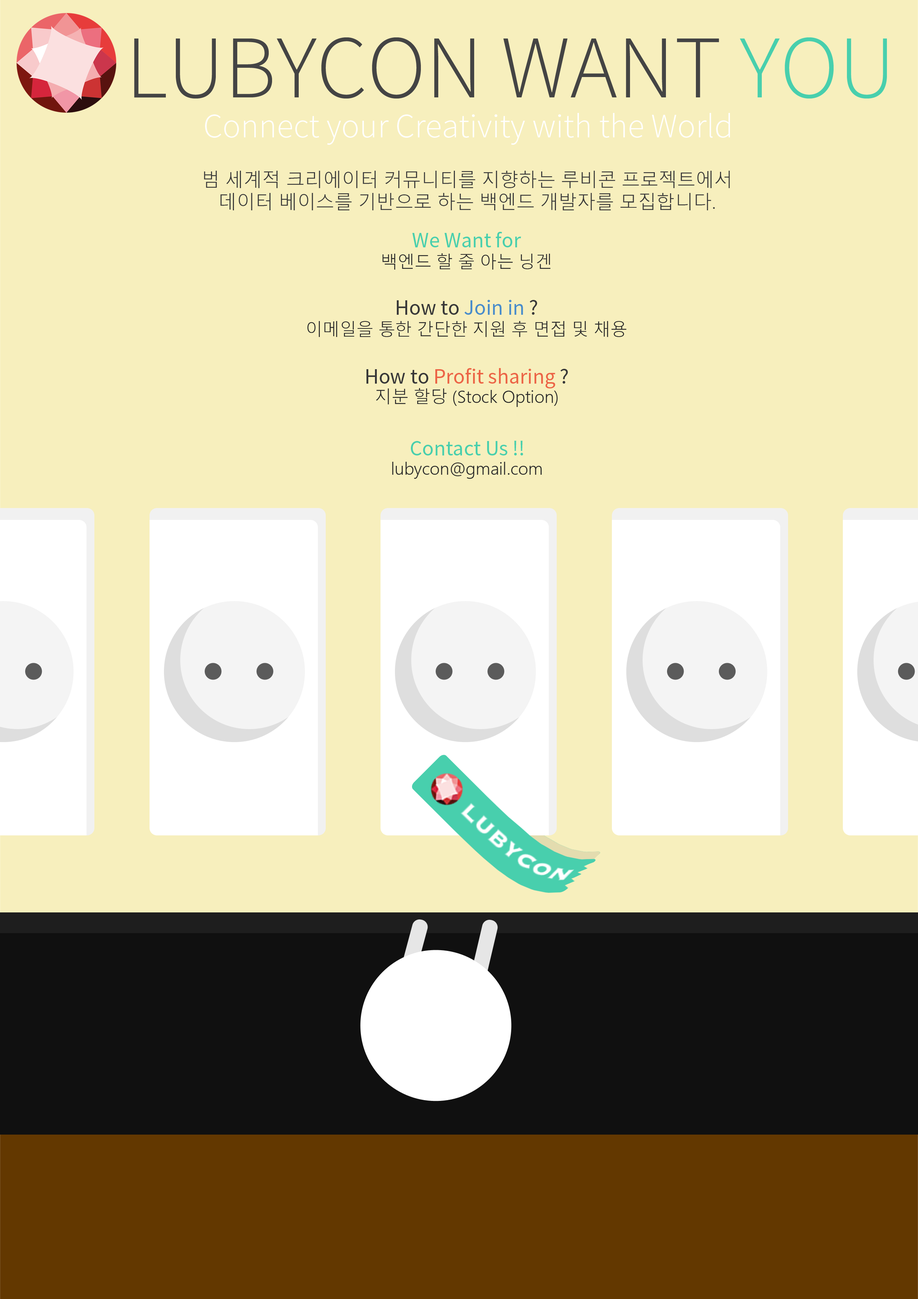
<style>
.page{position:relative;width:918px;height:1299px;background:#f7efbd}
.page>*{position:absolute;margin:0}
.t1{font:89.9px "SourceSansPro-Light";color:#444444}
.t2{font:89.9px "SourceSansPro-Light";color:#48cfad}
.t3{font:34.2px "SourceSansPro-Light";color:#fffffe}
.t4{font:18.5px "MalgunGothic-Semilight";color:#383838}
.t5{font:21.6px "SourceSansPro-Regular";color:#48cfad}
.t6{font:17px "MalgunGothic-Semilight";color:#282828}
.t7{font:21.6px "SourceSansPro-Regular";color:#488ccb}
.t8{font:21.6px "SourceSansPro-Regular";color:#383838}
.t9{font:21.6px "SourceSansPro-Regular";color:#ec6446}
</style>
<div class="page">
<p class="t1" style="left:134px;top:37px;width:753px;height:62px">LUBYCON WANT <span class="t2">YOU</span></p>
<p class="t3" style="left:205px;top:113px;width:525px;height:32px">Connect your Creativity with the World</p>
<p class="t4" style="left:204px;top:171px;width:526px;height:39px;text-align:center">범 세계적 크리에이터 커뮤니티를 지향하는 루비콘 프로젝트에서<br>데이터 베이스를 기반으로 하는 백엔드 개발자를 모집합니다.</p>
<p class="t5" style="left:412px;top:232px;width:109px;height:15px">We Want for</p>
<p class="t6" style="left:382px;top:253px;width:169px;height:17px">백엔드 할 줄 아는 닝겐</p>
<p class="t7" style="left:397px;top:300px;width:140px;height:15px"><span class="t8">How to </span>Join in<span class="t8"> ?</span></p>
<p class="t6" style="left:307px;top:321px;width:319px;height:16px">이메일을 통한 간단한 지원 후 면접 및 채용</p>
<p class="t9" style="left:367px;top:368px;width:201px;height:20px"><span class="t8">How to </span>Profit sharing <span class="t8">?</span></p>
<p class="t6" style="left:376px;top:388px;width:182px;height:19px">지분 할당 (Stock Option)</p>
<p class="t5" style="left:411px;top:441px;width:112px;height:14px">Contact Us !!</p>
<p class="t6" style="left:392px;top:462px;width:150px;height:17px">lubycon@gmail.com</p>
</div>
